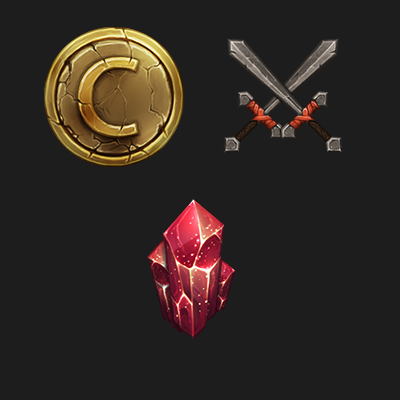
<style>
.page{position:relative;width:400px;height:400px;background:#1d1d1d}
.page>*{position:absolute;margin:0}
.t1{font:160px "MyriadPro-Regular"}
</style>
<div class="page">
<p class="t1" style="left:78px;top:58px;width:61px;height:79px">c</p>
</div>
